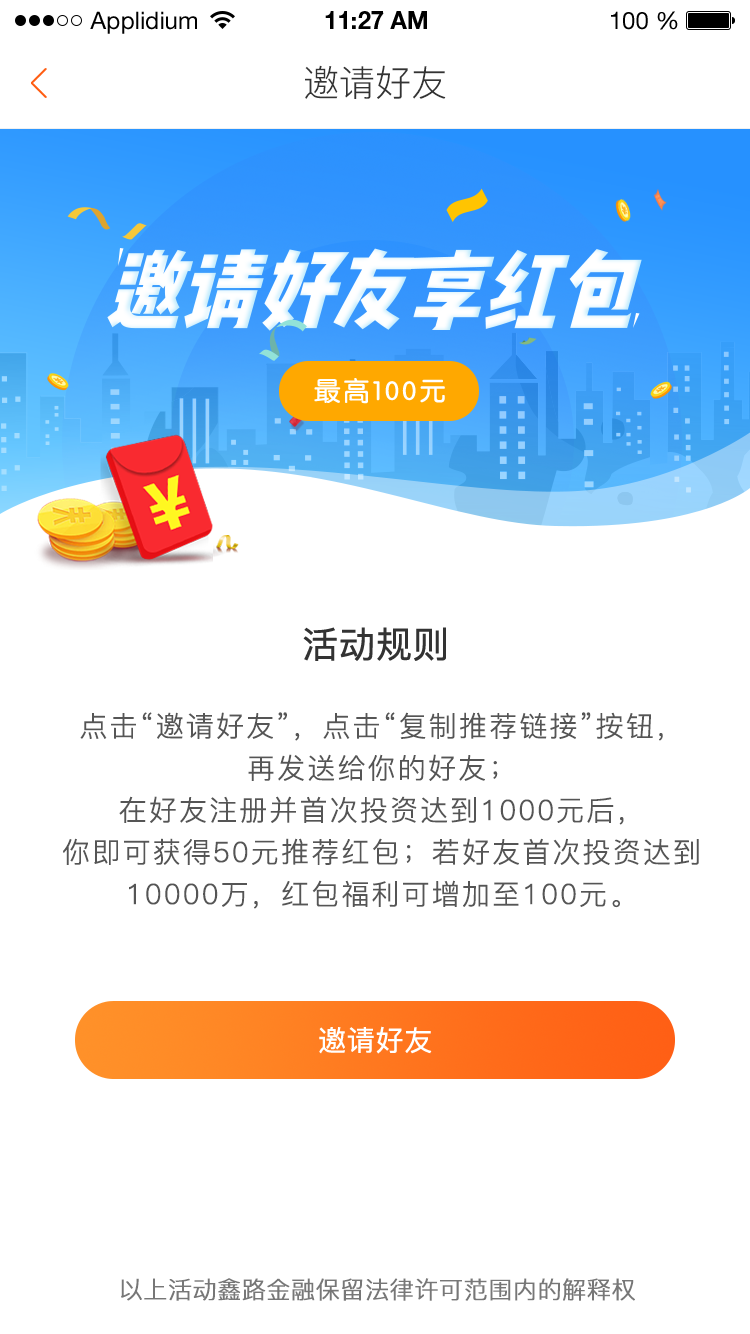
<style>
.page{position:relative;width:750px;height:1334px;background:#ffffff}
.page>*{position:absolute;margin:0}
.t1{font:24px "HelveticaNeueLTStd-Roman";color:#000000}
.t2{font:24px "HelveticaNeueLTStd-Bd";color:#000000}
.t3{font:36px "PingFang-SC-Regular";color:#333333}
.t4{font:26px "JZunYuan";letter-spacing:0.1em;color:#ffffff;font-weight:bold}
.t5{font:36px "PingFang-SC-Medium";color:#333333;font-weight:bold}
.t6{font:28px/42px "PingFang-SC-Regular";letter-spacing:0.05em;color:#555555;font-weight:bold}
.t7{font:28px "PingFang-SC-Medium";color:#ffffff;font-weight:bold}
.t8{font:24px "PingFang-SC-Regular";color:#777777;font-weight:bold}
</style>
<div class="page">
<p class="t1" style="left:90px;top:11px;width:107px;height:23px">Applidium</p>
<p class="t2" style="left:325px;top:11px;width:102px;height:18px">11:27 AM</p>
<p class="t1" style="left:611px;top:11px;width:67px;height:19px">100 %</p>
<p class="t3" style="left:305px;top:65px;width:141px;height:34px">邀请好友</p>
<p class="t4" style="left:314px;top:378px;width:131px;height:26px">最高100元</p>
<p class="t5" style="left:303px;top:627px;width:143px;height:34px">活动规则</p>
<p class="t6" style="left:63px;top:712px;width:636px;height:197px;text-align:center">点击“邀请好友”，点击“复制推荐链接”按钮，<br>再发送给你的好友；<br>在好友注册并首次投资达到1000元后，<br>你即可获得50元推荐红包；若好友首次投资达到<br>10000万，红包福利可增加至100元。</p>
<p class="t7" style="left:319px;top:1026px;width:113px;height:28px">邀请好友</p>
<p class="t8" style="left:121px;top:1278px;width:514px;height:23px">以上活动鑫路金融保留法律许可范围内的解释权</p>
</div>
